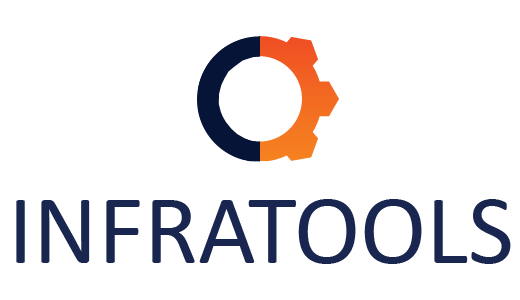
<style>
.page{position:relative;width:520px;height:300px;background:#ffffff}
.page>*{position:absolute;margin:0}
.t1{font:100px "Calibri";color:#192650}
</style>
<div class="page">
<p class="t1" style="left:16px;top:199px;width:495px;height:65px">INFRATOOLS</p>
</div>
